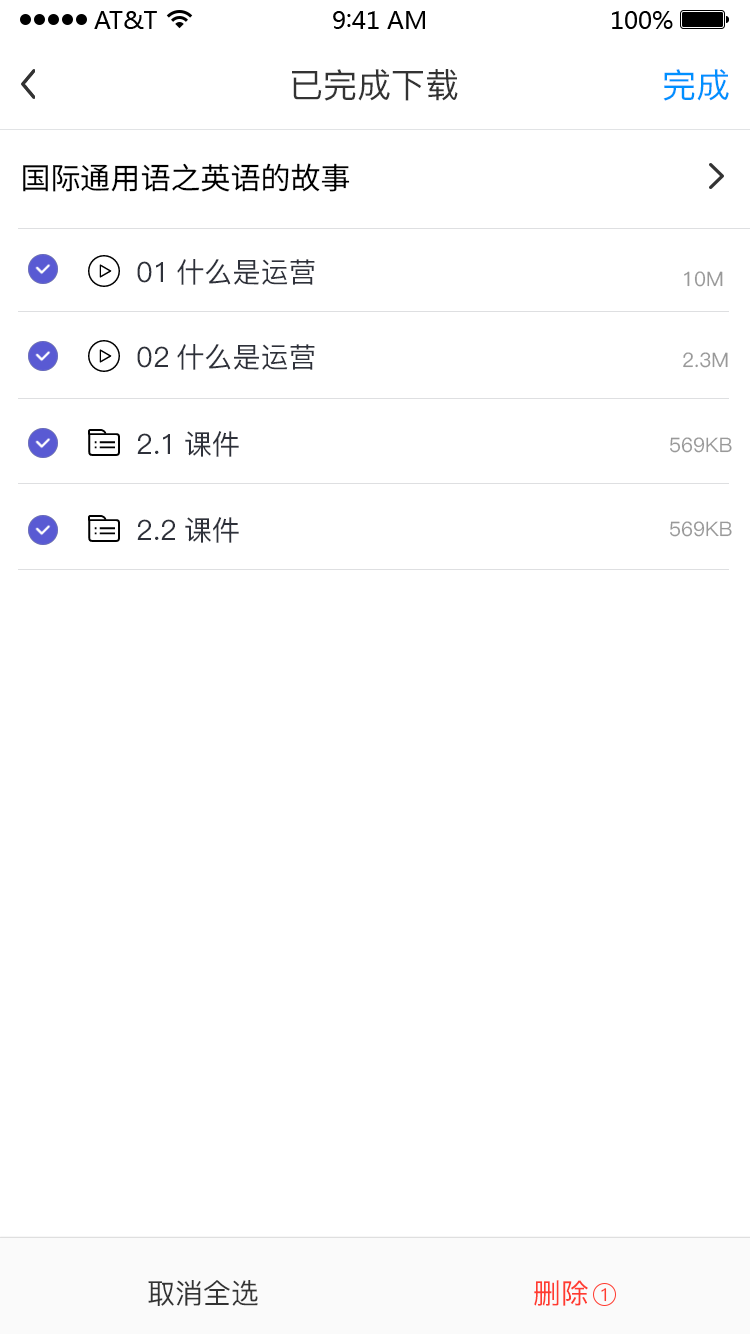
<style>
.page{position:relative;width:750px;height:1334px;background:#ffffff}
.page>*{position:absolute;margin:0}
.t1{font:34px "PingFang-SC-Medium";color:#333333}
.t2{font:34px "PingFang-SC-Medium";color:#0090ff}
.t3{font:30px "SourceHanSansCN-Regular";color:#000000}
.t4{font:28px "PingFang-SC-Medium";color:#2e313a}
.t5{font:20px "PingFang-SC-Medium";color:#999999}
.t6{font:28px "PingFang-SC-Medium";color:#333333}
.t7{font:28px "PingFang-SC-Medium";color:#ff3b30}
.t8{font:18px "PingFang-SC-Medium";color:#ff3b30}
</style>
<div class="page">
<p class="t1" style="left:292px;top:69px;width:166px;height:32px">已完成下载</p>
<p class="t2" style="left:663px;top:69px;width:66px;height:32px">完成</p>
<p class="t3" style="left:23px;top:163px;width:327px;height:29px">国际通用语之英语的故事</p>
<p class="t4" style="left:137px;top:259px;width:178px;height:26px">01什么是运营</p>
<p class="t5" style="left:684px;top:271px;width:39px;height:16px">10M</p>
<p class="t4" style="left:137px;top:344px;width:178px;height:26px">02什么是运营</p>
<p class="t5" style="left:683px;top:352px;width:45px;height:16px">2.3M</p>
<p class="t4" style="left:137px;top:431px;width:102px;height:26px">2.1课件</p>
<p class="t5" style="left:670px;top:437px;width:62px;height:16px">569KB</p>
<p class="t4" style="left:137px;top:517px;width:102px;height:26px">2.2课件</p>
<p class="t5" style="left:670px;top:521px;width:62px;height:16px">569KB</p>
<p class="t6" style="left:148px;top:1280px;width:110px;height:26px">取消全选</p>
<p class="t7" style="left:534px;top:1280px;width:54px;height:26px">删除</p>
<p class="t8" style="left:601px;top:1288px;width:6px;height:14px">1</p>
</div>
